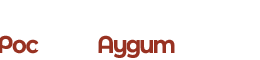
<style>
.page{position:relative;width:260px;height:60px;background:#ffffff}
.page>*{position:absolute;margin:0}
.t1{font:24px "Montserrat-Bold";letter-spacing:-0.05em;color:#983222;scale:0.94 1}
.t2{font:24px "Montserrat-Bold";letter-spacing:-0.1em;color:#983222;scale:0.94 1}
</style>
<div class="page">
<p class="t1" style="left:0px;top:35px;width:39px;height:19px">Рос</p>
<p class="t2" style="left:98px;top:35px;width:77px;height:23px">Аудит</p>
</div>
